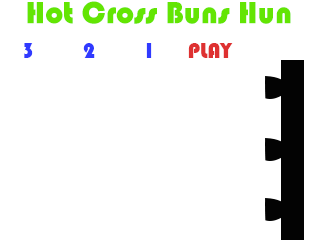
<style>
.page{position:relative;width:320px;height:240px;background:#ffffff}
.page>*{position:absolute;margin:0}
.t1{font:32px "Bauhaus93";color:#63e503}
.t2{font:22px "Bauhaus93";color:#303aff}
.t3{font:22px "Bauhaus93";color:#de3131}
</style>
<div class="page">
<p class="t1" style="left:27px;top:1px;width:264px;height:23px">Hot Cross Buns Hun</p>
<p class="t2" style="left:24px;top:43px;width:9px;height:15px">3</p>
<p class="t2" style="left:83px;top:43px;width:12px;height:15px">2</p>
<p class="t2" style="left:146px;top:43px;width:6px;height:15px">1</p>
<p class="t3" style="left:188px;top:43px;width:45px;height:15px">PLAY</p>
</div>
